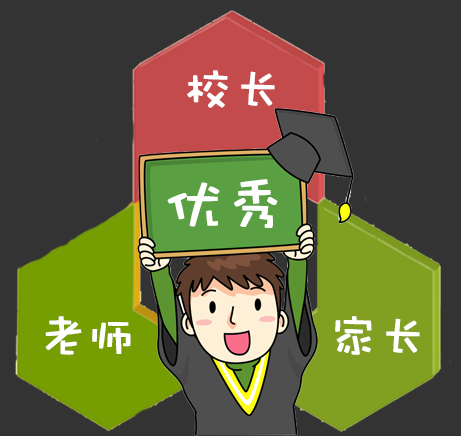
<style>
.page{position:relative;width:461px;height:436px;background:#333333}
.page>*{position:absolute;margin:0}
.t1{font:48px "DFWaWaSC-W5";color:#ffffff;font-weight:bold}
.t2{font:60px "DFWaWaSC-W5";color:#ffffff;font-weight:bold}
</style>
<div class="page">
<p class="t1" style="left:187px;top:70px;width:88px;height:38px">校长</p>
<p class="t2" style="left:167px;top:179px;width:111px;height:49px;rotate:-2deg">优秀</p>
<p class="t1" style="left:45px;top:316px;width:86px;height:39px">老师</p>
<p class="t1" style="left:335px;top:316px;width:85px;height:39px">家长</p>
</div>
